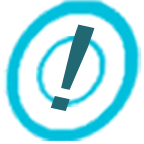
<style>
.page{position:relative;width:144px;height:144px;background:#ffffff}
.page>*{position:absolute;margin:0}
.t1{font:122.2px "ArialMT";color:#216873;scale:1.22 1}
</style>
<div class="page">
<p class="t1" style="left:50px;top:24px;width:45px;height:87px;rotate:12deg">!</p>
</div>
